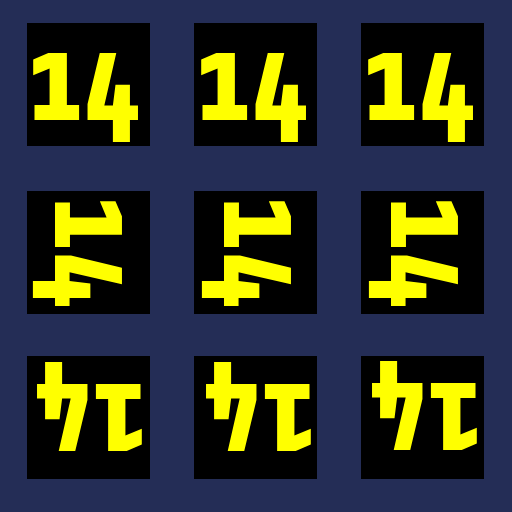
<style>
.page{position:relative;width:512px;height:512px;background:#242d56}
.page>*{position:absolute;margin:0}
.t1{font:130px "Share-BoldOSF";color:#ffff00}
</style>
<div class="page">
<p class="t1" style="left:33px;top:53px;width:105px;height:90px">14</p>
<p class="t1" style="left:201px;top:53px;width:105px;height:90px">14</p>
<p class="t1" style="left:368px;top:53px;width:105px;height:90px">14</p>
<p class="t1" style="left:32px;top:201px;width:90px;height:105px;rotate:90deg">14</p>
<p class="t1" style="left:201px;top:201px;width:90px;height:105px;rotate:90deg">14</p>
<p class="t1" style="left:368px;top:201px;width:90px;height:105px;rotate:90deg">14</p>
<p class="t1" style="left:37px;top:361px;width:105px;height:90px;rotate:-180deg">14</p>
<p class="t1" style="left:206px;top:361px;width:105px;height:90px;rotate:-180deg">14</p>
<p class="t1" style="left:372px;top:360px;width:105px;height:90px;rotate:-180deg">14</p>
</div>
